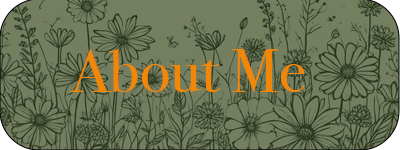
<style>
.page{position:relative;width:400px;height:150px}
.page>*{position:absolute;margin:0}
.t1{font:61.4px "BodoniSvtyTwoOSITCTT-Book";color:#f28606;scale:1.03 1}
</style>
<div class="page">
<p class="t1" style="left:69px;top:49px;width:236px;height:43px">About Me</p>
</div>
